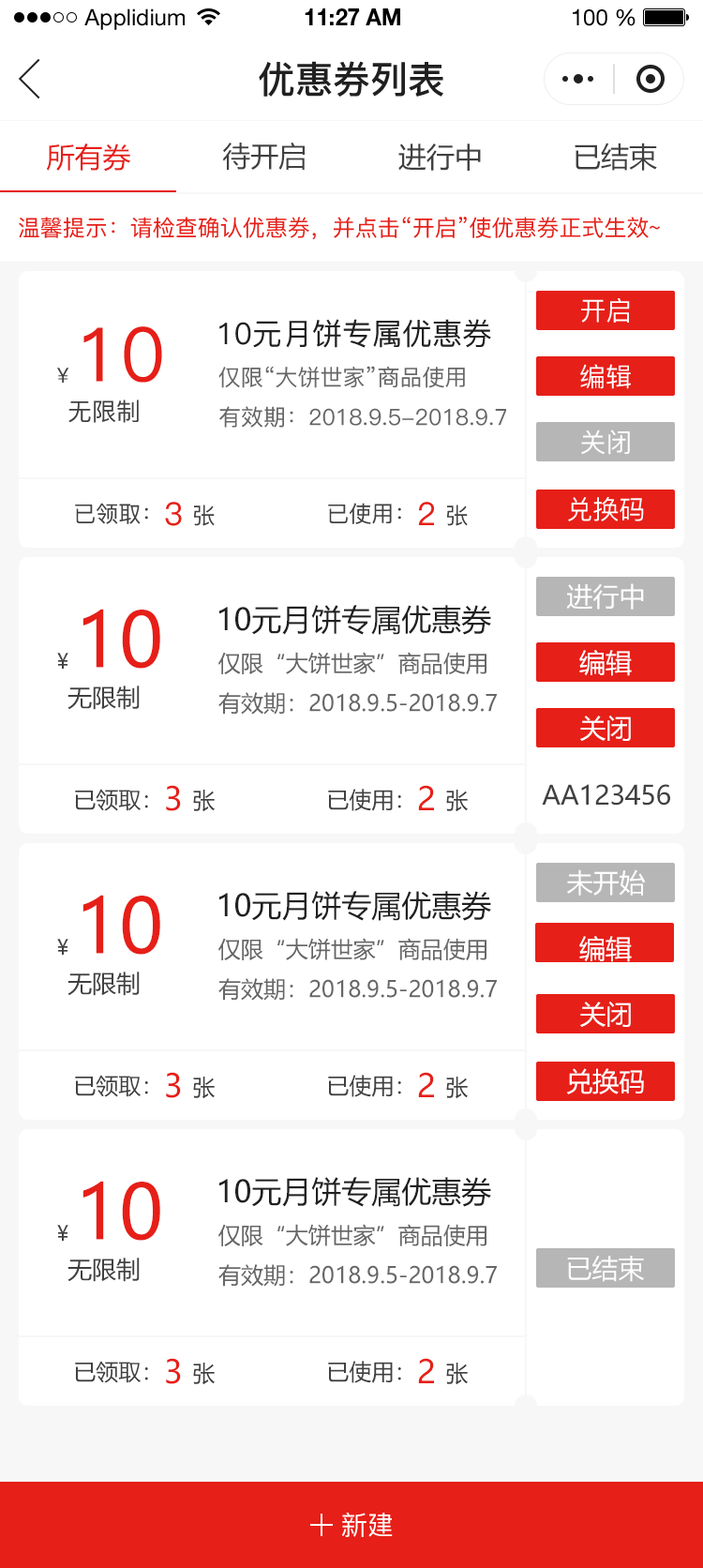
<style>
.page{position:relative;width:703px;height:1568px;background:#ffffff}
.page>*{position:absolute;margin:0}
.t1{font:22.5px "HelveticaNeueLTStd-Roman";color:#000000}
.t2{font:22.5px "HelveticaNeueLTStd-Bd";color:#000000}
.t3{font:37.5px "PingFang-SC-Bold";color:#202020;text-transform:uppercase}
.t4{font:28.1px "MicrosoftYaHei";color:#e61f18;text-transform:uppercase}
.t5{font:28.1px "MicrosoftYaHei";color:#404040;text-transform:uppercase}
.t6{font:22.5px "PingFang-SC-Medium";color:#e61f18;text-transform:uppercase}
.t7{font:26.3px "PingFang-SC-Medium";color:#ffffff;text-transform:uppercase}
.t8{font:75px "PingFang-SC-Medium";color:#e61f18;text-transform:uppercase}
.t9{font:30px "PingFang-SC-Medium";color:#202020;text-transform:uppercase}
.t10{font:22.5px "PingFang-SC-Medium";color:#666666;text-transform:uppercase}
.t11{font:20.6px "PingFang-SC-Medium";color:#404040;text-transform:uppercase}
.t12{font:24.4px "PingFang-SC-Medium";color:#404040;text-transform:uppercase}
.t13{font:22.5px "PingFang-SC-Medium";color:#404040;text-transform:uppercase}
.t14{font:31.9px "PingFang-SC-Medium";color:#e61f18;text-transform:uppercase}
.t15{font:26.3px "MicrosoftYaHei";color:#ffffff;text-transform:uppercase}
.t16{font:30px "MicrosoftYaHei";color:#202020;text-transform:uppercase}
.t17{font:75px "MicrosoftYaHei";color:#e61f18;text-transform:uppercase}
.t18{font:20.6px "MicrosoftYaHei";color:#404040;text-transform:uppercase}
.t19{font:22.5px "MicrosoftYaHei";color:#666666;text-transform:uppercase}
.t20{font:24.4px "MicrosoftYaHei";color:#404040;text-transform:uppercase}
.t21{font:31.9px "MicrosoftYaHei";color:#e61f18;text-transform:uppercase}
.t22{font:26.3px "MicrosoftYaHei";color:#404040;text-transform:uppercase}
.t23{font:22.5px "MicrosoftYaHei";color:#404040;text-transform:uppercase}
</style>
<div class="page">
<p class="t1" style="left:84px;top:8px;width:101px;height:22px">Applidium</p>
<p class="t2" style="left:305px;top:8px;width:95px;height:17px">11:27 AM</p>
<p class="t1" style="left:573px;top:8px;width:63px;height:18px">100 %</p>
<p class="t3" style="left:259px;top:61px;width:185px;height:36px">优惠券列表</p>
<p class="t4" style="left:46px;top:143px;width:84px;height:29px">所有券</p>
<p class="t5" style="left:222px;top:142px;width:83px;height:28px">待开启</p>
<p class="t5" style="left:399px;top:143px;width:82px;height:28px">进行中</p>
<p class="t5" style="left:575px;top:143px;width:82px;height:28px">已结束</p>
<p class="t6" style="left:19px;top:217px;width:641px;height:23px">温馨提示：请检查确认优惠券，并点击“开启”使优惠券正式生效~</p>
<p class="t7" style="left:581px;top:298px;width:49px;height:25px">开启</p>
<p class="t8" style="left:83px;top:326px;width:79px;height:57px">10</p>
<p class="t9" style="left:219px;top:319px;width:272px;height:29px">10元月饼专属优惠券</p>
<p class="t10" style="left:219px;top:366px;width:246px;height:22px">仅限“大饼世家”商品使用</p>
<p class="t7" style="left:580px;top:364px;width:51px;height:25px">编辑</p>
<p class="t11" style="left:57px;top:368px;width:12px;height:15px">¥</p>
<p class="t12" style="left:68px;top:400px;width:71px;height:23px">无限制</p>
<p class="t10" style="left:219px;top:406px;width:287px;height:22px">有效期：2018.9.5-2018.9.7</p>
<p class="t7" style="left:581px;top:430px;width:49px;height:25px">关闭</p>
<p class="t7" style="left:568px;top:497px;width:76px;height:24px">兑换码</p>
<p class="t13" style="left:75px;top:503px;width:73px;height:21px">已领取：</p>
<p class="t14" style="left:165px;top:502px;width:17px;height:24px">3</p>
<p class="t13" style="left:194px;top:505px;width:21px;height:21px">张</p>
<p class="t13" style="left:328px;top:503px;width:73px;height:21px">已使用：</p>
<p class="t14" style="left:418px;top:502px;width:16px;height:23px">2</p>
<p class="t13" style="left:447px;top:505px;width:21px;height:21px">张</p>
<p class="t15" style="left:566px;top:583px;width:78px;height:27px">进行中</p>
<p class="t16" style="left:219px;top:605px;width:272px;height:30px">10元月饼专属优惠券</p>
<p class="t17" style="left:83px;top:609px;width:77px;height:60px">10</p>
<p class="t18" style="left:57px;top:653px;width:11px;height:16px">¥</p>
<p class="t19" style="left:219px;top:652px;width:268px;height:23px">仅限“大饼世家”商品使用</p>
<p class="t15" style="left:580px;top:650px;width:52px;height:26px">编辑</p>
<p class="t20" style="left:68px;top:686px;width:72px;height:24px">无限制</p>
<p class="t19" style="left:219px;top:692px;width:278px;height:23px">有效期：2018.9.5-2018.9.7</p>
<p class="t15" style="left:580px;top:716px;width:51px;height:25px">关闭</p>
<p class="t21" style="left:166px;top:785px;width:15px;height:26px">3</p>
<p class="t21" style="left:418px;top:785px;width:16px;height:25px">2</p>
<p class="t22" style="left:542px;top:784px;width:129px;height:22px">AA123456</p>
<p class="t23" style="left:75px;top:789px;width:73px;height:22px">已领取：</p>
<p class="t23" style="left:193px;top:790px;width:22px;height:22px">张</p>
<p class="t23" style="left:328px;top:789px;width:73px;height:22px">已使用：</p>
<p class="t23" style="left:446px;top:790px;width:22px;height:22px">张</p>
<p class="t15" style="left:567px;top:869px;width:79px;height:27px">未开始</p>
<p class="t16" style="left:219px;top:891px;width:272px;height:30px">10元月饼专属优惠券</p>
<p class="t17" style="left:83px;top:895px;width:77px;height:60px">10</p>
<p class="t18" style="left:57px;top:939px;width:11px;height:16px">¥</p>
<p class="t19" style="left:219px;top:938px;width:268px;height:23px">仅限“大饼世家”商品使用</p>
<p class="t15" style="left:580px;top:936px;width:52px;height:26px">编辑</p>
<p class="t20" style="left:68px;top:972px;width:72px;height:24px">无限制</p>
<p class="t19" style="left:219px;top:978px;width:278px;height:23px">有效期：2018.9.5-2018.9.7</p>
<p class="t15" style="left:580px;top:1002px;width:51px;height:25px">关闭</p>
<p class="t21" style="left:166px;top:1072px;width:15px;height:26px">3</p>
<p class="t21" style="left:418px;top:1072px;width:16px;height:25px">2</p>
<p class="t15" style="left:566px;top:1068px;width:78px;height:26px">兑换码</p>
<p class="t23" style="left:75px;top:1075px;width:73px;height:22px">已领取：</p>
<p class="t23" style="left:193px;top:1077px;width:22px;height:22px">张</p>
<p class="t23" style="left:328px;top:1075px;width:73px;height:22px">已使用：</p>
<p class="t23" style="left:446px;top:1077px;width:22px;height:22px">张</p>
<p class="t17" style="left:83px;top:1181px;width:77px;height:60px">10</p>
<p class="t16" style="left:219px;top:1177px;width:272px;height:30px">10元月饼专属优惠券</p>
<p class="t18" style="left:57px;top:1225px;width:11px;height:16px">¥</p>
<p class="t19" style="left:219px;top:1224px;width:268px;height:23px">仅限“大饼世家”商品使用</p>
<p class="t20" style="left:68px;top:1258px;width:72px;height:24px">无限制</p>
<p class="t19" style="left:219px;top:1264px;width:278px;height:23px">有效期：2018.9.5-2018.9.7</p>
<p class="t15" style="left:567px;top:1256px;width:77px;height:26px">已结束</p>
<p class="t23" style="left:75px;top:1361px;width:73px;height:22px">已领取：</p>
<p class="t21" style="left:166px;top:1358px;width:15px;height:26px">3</p>
<p class="t23" style="left:328px;top:1361px;width:73px;height:22px">已使用：</p>
<p class="t21" style="left:418px;top:1358px;width:16px;height:25px">2</p>
<p class="t23" style="left:193px;top:1363px;width:22px;height:22px">张</p>
<p class="t23" style="left:446px;top:1363px;width:22px;height:22px">张</p>
<p class="t7" style="left:341px;top:1512px;width:52px;height:25px">新建</p>
</div>
